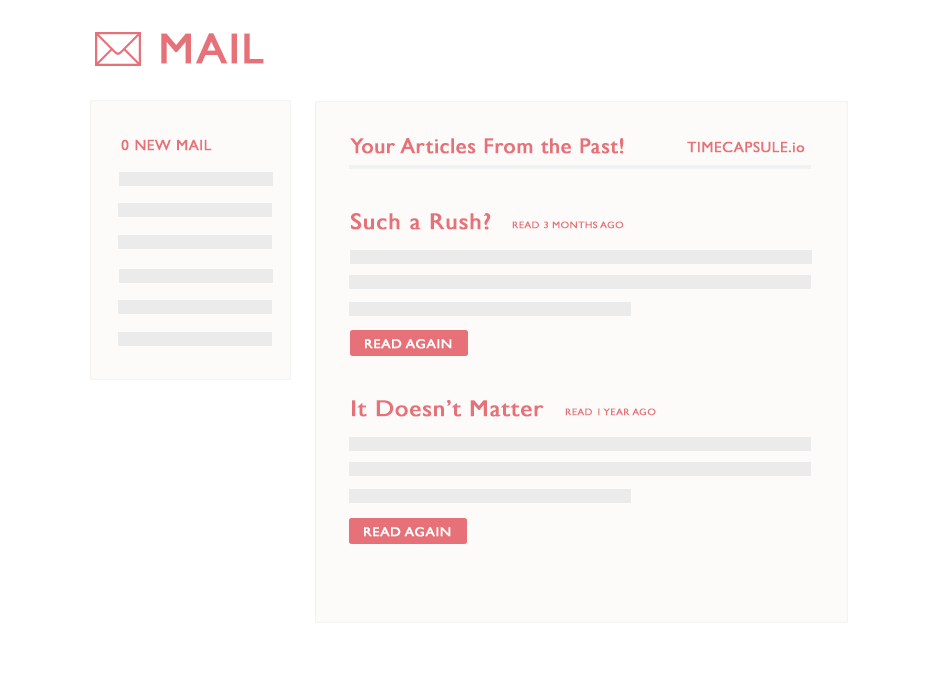
<style>
.page{position:relative;width:950px;height:674px;background:#ffffff}
.page>*{position:absolute;margin:0}
.t1{font:43.3px "GillSans";letter-spacing:0.025em;color:#e67179;font-weight:bold;scale:1.03 1}
.t2{font:14.9px "GillSans";letter-spacing:0.025em;color:#e67179;font-weight:bold}
.t3{font:21.4px "GillSans";letter-spacing:0.025em;color:#e67179;font-weight:bold}
.t4{font:23.3px "GillSans";letter-spacing:0.025em;color:#e67179;font-weight:bold;scale:1.05 1}
.t5{font:9.3px "GillSans";letter-spacing:0.025em;color:#e67179;font-weight:bold;scale:1.09 1}
.t6{font:13px "GillSans";letter-spacing:0.025em;color:#ffffff;font-weight:bold;scale:1.08 1}
</style>
<div class="page">
<p class="t1" style="left:161px;top:33px;width:103px;height:31px">MAIL</p>
<p class="t2" style="left:121px;top:139px;width:91px;height:12px">0 NEW MAIL</p>
<p class="t3" style="left:350px;top:138px;width:274px;height:16px">Your Articles From the Past!</p>
<p class="t2" style="left:687px;top:141px;width:118px;height:12px">TIMECAPSULE.io</p>
<p class="t4" style="left:351px;top:213px;width:140px;height:17px">Such a Rush?</p>
<p class="t5" style="left:512px;top:221px;width:112px;height:8px">READ 3 MONTHS AGO</p>
<p class="t6" style="left:365px;top:339px;width:87px;height:10px">READ AGAIN</p>
<p class="t4" style="left:352px;top:400px;width:192px;height:17px">It Doesn’t Matter</p>
<p class="t5" style="left:565px;top:408px;width:91px;height:8px">READ 1 YEAR AGO</p>
<p class="t6" style="left:364px;top:527px;width:87px;height:10px">READ AGAIN</p>
</div>
